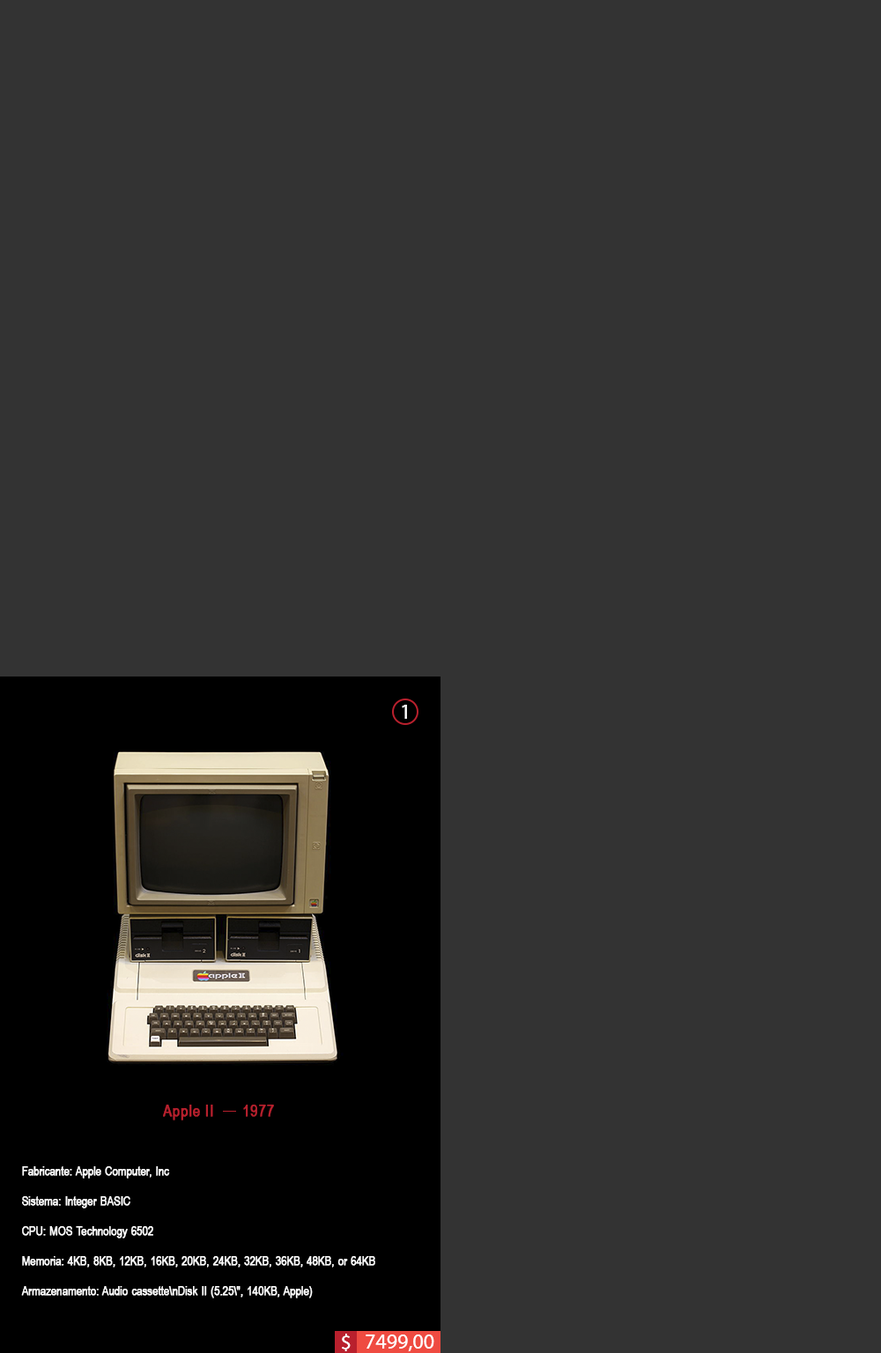
<style>
.page{position:relative;width:881px;height:1353px;background:#333333}
.page>*{position:absolute;margin:0}
.t1{font:21.1px "MyriadPro-Regular";color:#ffffff}
.t2{font:15.9px "ArialNarrow";color:#b9202d;font-weight:bold}
.t3{font:12.3px "ArialNarrow";color:#ffffff;font-weight:bold}
</style>
<div class="page">
<p class="t1" style="left:402px;top:705px;width:5px;height:14px">1</p>
<p class="t2" style="left:163px;top:1105px;width:50px;height:16px">Apple II</p>
<p class="t2" style="left:243px;top:1105px;width:31px;height:12px">1977</p>
<p class="t3" style="left:22px;top:1167px;width:148px;height:12px">Fabricante: Apple Computer, Inc</p>
<p class="t3" style="left:22px;top:1197px;width:108px;height:12px">Sistema: Integer BASIC</p>
<p class="t3" style="left:22px;top:1226px;width:131px;height:13px">CPU: MOS Technology 6502</p>
<p class="t3" style="left:22px;top:1256px;width:353px;height:12px">Memoria: 4KB, 8KB, 12KB, 16KB, 20KB, 24KB, 32KB, 36KB, 48KB, or 64KB</p>
<p class="t3" style="left:21px;top:1286px;width:292px;height:13px">Armazenamento: Audio cassette\nDisk II (5.25\", 140KB, Apple)</p>
<p class="t1" style="left:342px;top:1334px;width:9px;height:18px">$</p>
<p class="t1" style="left:366px;top:1335px;width:68px;height:17px">7499,00</p>
</div>
